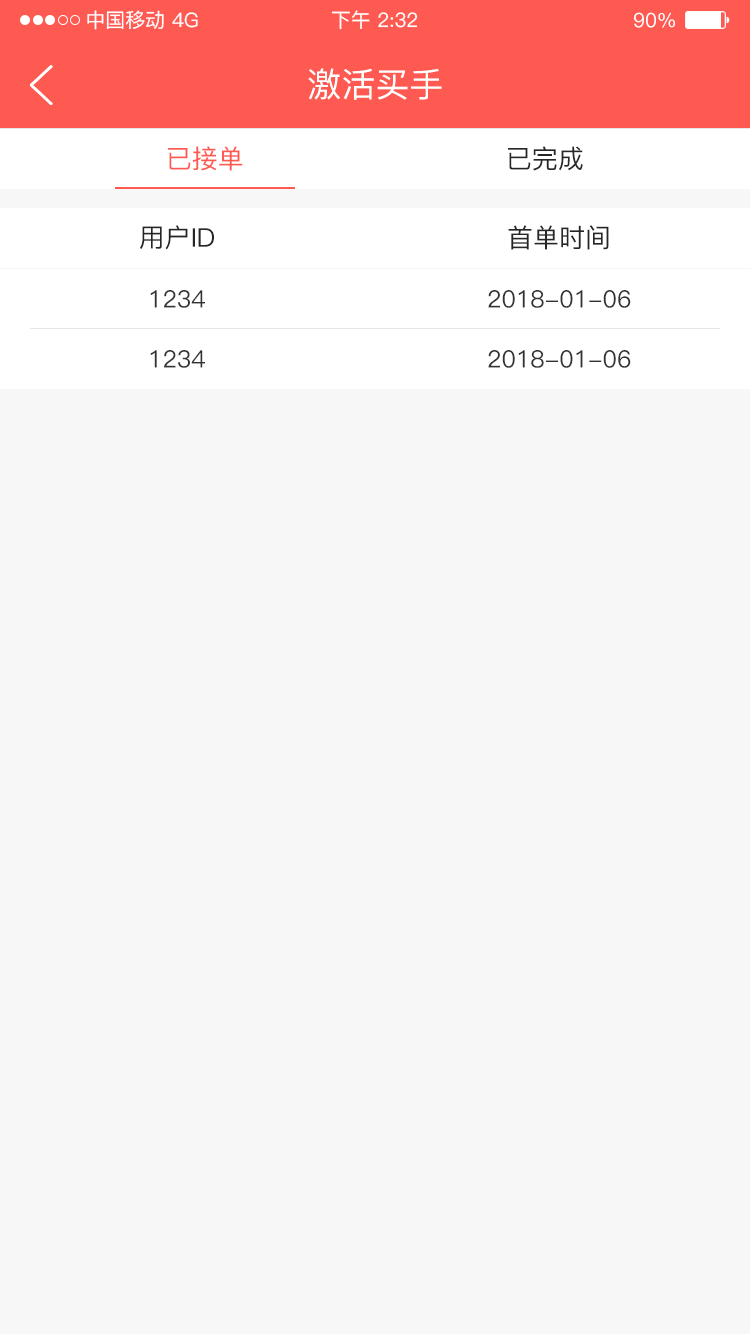
<style>
.page{position:relative;width:750px;height:1334px;background:#f7f7f7}
.page>*{position:absolute;margin:0}
.t1{font:20px "PingFang-SC-Medium";color:#ffffff}
.t2{font:34px "PingFang-SC-Medium";color:#ffffff}
.t3{font:26px "PingFang-SC-Medium";color:#fe5a51}
.t4{font:26px "PingFang-SC-Medium";color:#262626}
.t5{font:24px "PingFang-SC-Medium";color:#333333}
</style>
<div class="page">
<p class="t1" style="left:87px;top:10px;width:77px;height:20px">中国移动</p>
<p class="t1" style="left:172px;top:12px;width:26px;height:16px">4G</p>
<p class="t1" style="left:331px;top:10px;width:87px;height:20px">下午 2:32</p>
<p class="t1" style="left:634px;top:12px;width:41px;height:16px">90%</p>
<p class="t2" style="left:308px;top:68px;width:134px;height:32px">激活买手</p>
<p class="t3" style="left:168px;top:146px;width:75px;height:25px">已接单</p>
<p class="t4" style="left:508px;top:146px;width:75px;height:25px">已完成</p>
<p class="t4" style="left:140px;top:225px;width:74px;height:25px">用户ID</p>
<p class="t4" style="left:508px;top:225px;width:101px;height:25px">首单时间</p>
<p class="t5" style="left:150px;top:290px;width:55px;height:18px">1234</p>
<p class="t5" style="left:488px;top:290px;width:143px;height:18px">2018-01-06</p>
<p class="t5" style="left:150px;top:350px;width:55px;height:18px">1234</p>
<p class="t5" style="left:488px;top:350px;width:143px;height:18px">2018-01-06</p>
</div>
